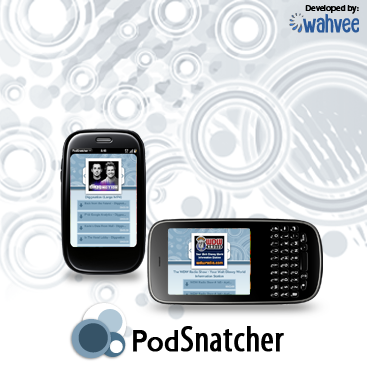
<style>
.page{position:relative;width:367px;height:373px;background:#ffffff}
.page>*{position:absolute;margin:0}
.t1{font:8.4px "MyriadPro-Regular";color:#000000;font-weight:bold}
.t2{font:36px "MyriadPro-Cond";color:#000000;font-weight:bold}
.t3{font:30px "GillSansMT";color:#000000;font-weight:bold}
</style>
<div class="page">
<p class="t1" style="left:305px;top:5px;width:54px;height:9px">Developed by:</p>
<p class="t2" style="left:133px;top:326px;width:151px;height:26px"><span class="t3">Pod</span>Snatcher</p>
</div>
